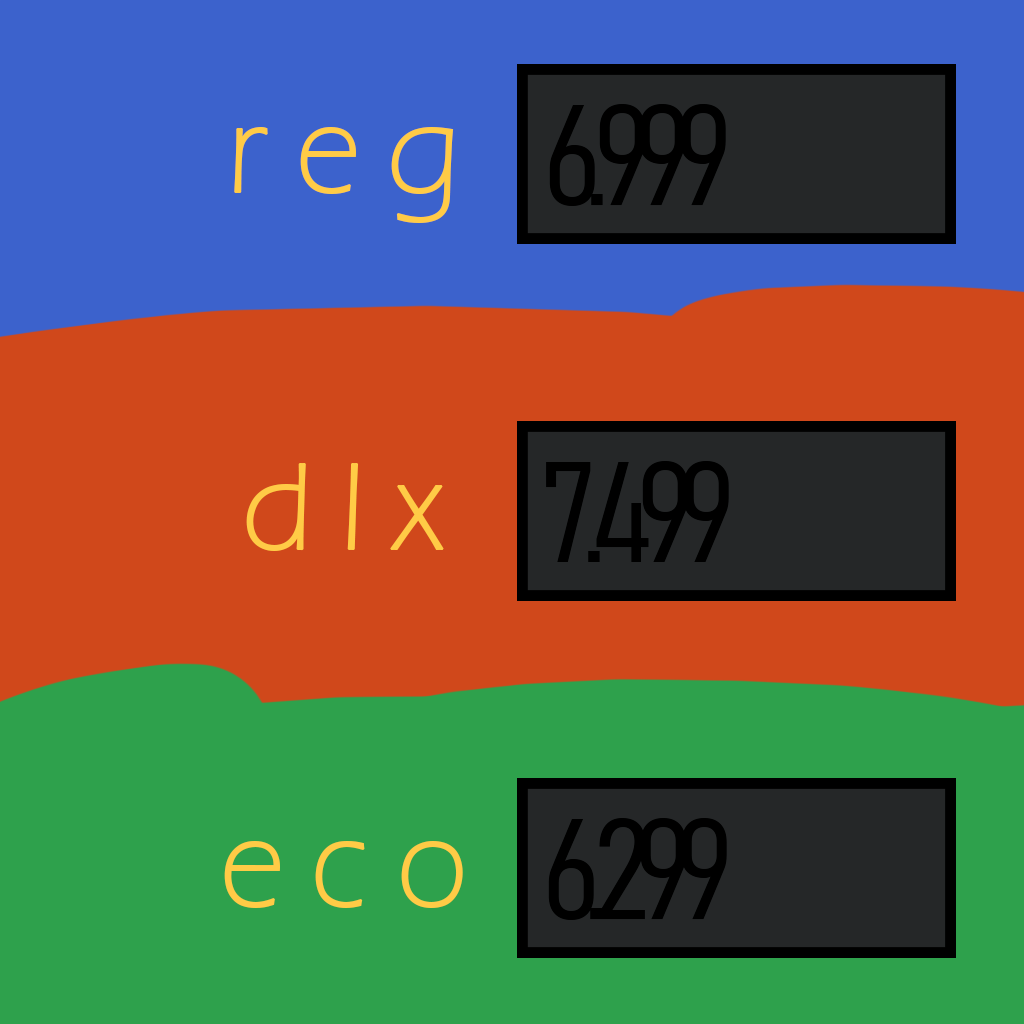
<style>
.page{position:relative;width:1024px;height:1024px;background:#d0481b}
.page>*{position:absolute;margin:0}
.t1{font:140.8px "Bahnschrift-LightCondensed";letter-spacing:-0.1em;color:#000000;font-weight:bold}
.t2{font:128px "ErasITC-Light";letter-spacing:0.2em;color:#ffcb46;font-weight:bold}
</style>
<div class="page">
<p class="t1" style="left:549px;top:104px;width:177px;height:102px">6.999</p>
<p class="t2" style="left:234px;top:127px;width:220px;height:96px">reg</p>
<p class="t1" style="left:546px;top:461px;width:183px;height:101px">7.499</p>
<p class="t2" style="left:246px;top:463px;width:198px;height:88px">dlx</p>
<p class="t1" style="left:548px;top:818px;width:179px;height:102px">6.299</p>
<p class="t2" style="left:224px;top:841px;width:239px;height:67px">eco</p>
</div>
